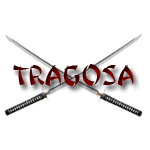
<style>
.page{position:relative;width:150px;height:150px;background:#ffffff}
.page>*{position:absolute;margin:0}
.t1{font:25px "JingJing"}
</style>
<div class="page">
<p class="t1" style="left:13px;top:64px;width:121px;height:22px">Tragosa</p>
</div>
